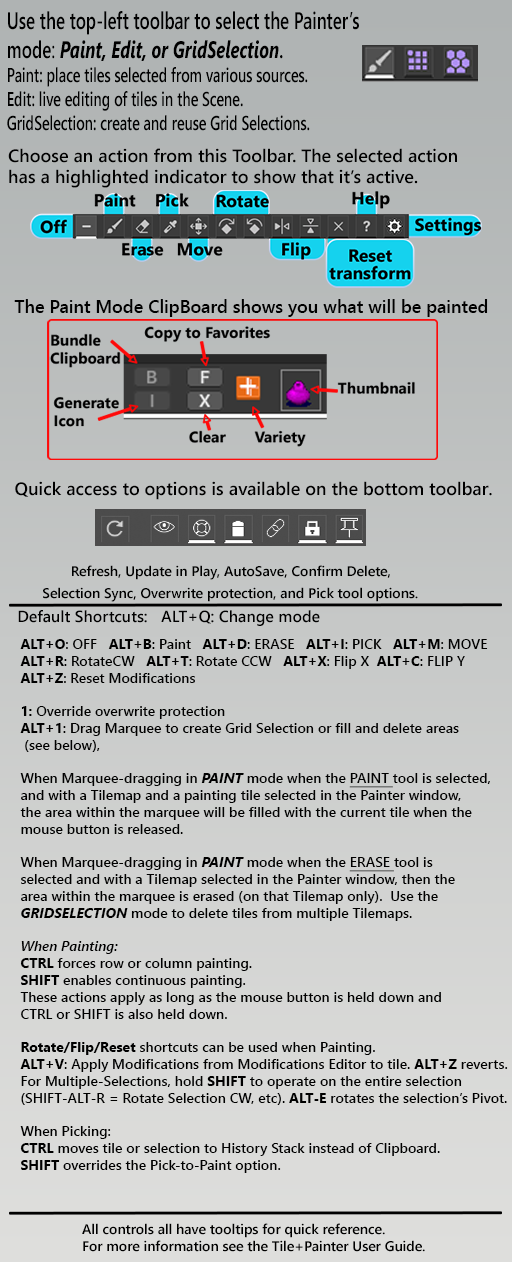
<style>
.page{position:relative;width:512px;height:1262px}
.page>*{position:absolute;margin:0}
.t1{font:20px "SegoeUI-Semibold";color:#000000;scale:0.71 1}
.t2{font:24px "SegoeUI-Semibold";color:#000000;scale:0.71 1}
.t3{font:24px "SegoeUI";color:#000000;scale:0.71 1}
.t4{font:24px "SegoeUI-BoldItalic";color:#000000;scale:0.71 1}
.t5{font:18px "SegoeUI-Semibold";color:#000000}
.t6{font:17px "SegoeUI-Semibold";color:#000000}
.t7{font:14px "SegoeUI-Semibold";color:#000000}
.t8{font:16px "SegoeUI-Semibold";color:#000000}
.t9{font:14px "SegoeUI-Bold";color:#000000}
.t10{font:14px "SegoeUI-BoldItalic";color:#000000}
.t11{font:14px "SegoeUI-Semibold";color:#000000;text-decoration:underline}
.t12{font:14px "SegoeUI-SemiboldItalic";color:#000000}
</style>
<div class="page">
<p class="t1" style="left:7px;top:11px;width:352px;height:120px"><span class="t2">Use the top-left toolbar to select the Painter’s<br>mode</span><span class="t3">:</span><span class="t4"> Paint, Edit, or GridSelection</span><span class="t2">. <br></span>Paint: place tiles selected from various sources.<br>Edit: live editing of tiles in the Scene.<br>GridSelection: create and reuse Grid Selections.</p>
<p class="t5" style="left:8px;top:148px;width:449px;height:40px">Choose an action from this Toolbar. The selected action<br>has a highlighted indicator to show that it’s active.</p>
<p class="t5" style="left:14px;top:299px;width:474px;height:18px">The Paint Mode ClipBoard shows you what will be painted</p>
<p class="t5" style="left:15px;top:481px;width:477px;height:19px">Quick access to options is available on the bottom toolbar<span class="t6">.</span></p>
<p class="t7" style="left:43px;top:565px;width:375px;height:37px;text-align:center">Refresh, Update in Play, AutoSave, Confirm Delete, <br>Selection Sync, Overwrite protection, and Pick tool options.</p>
<p class="t8" style="left:18px;top:610px;width:302px;height:16px">Default Shortcuts:   ALT+Q: Change mode</p>
<p class="t7" style="left:20px;top:639px;width:488px;height:534px"><span class="t9">ALT+O</span>: OFF   <span class="t9">ALT+B</span>: Paint   <span class="t9">ALT+D</span>: ERASE   <span class="t9">ALT+I</span>: PICK   <span class="t9">ALT+M</span>: MOVE<br><span class="t9">ALT+R</span>: RotateCW   <span class="t9">ALT+T</span>: Rotate CCW   <span class="t9">ALT+X</span>: Flip X  <span class="t9">ALT+C</span>: FLIP Y<br><span class="t9">ALT+Z</span>: Reset Modifications<br><br><span class="t9">1: </span>Override overwrite protection<br><span class="t9">ALT+1</span>: Drag Marquee to create Grid Selection or fill and delete areas<br> (see below), <br><br>When Marquee-dragging in <span class="t10">PAINT </span>mode when the <span class="t11">PAINT </span>tool is selected,<br>and with a Tilemap and a painting tile selected in the Painter window,<br>the area within the marquee will be filled with the current tile when the<br>mouse button is released.<br><br>When Marquee-dragging in <span class="t10">PAINT </span>mode when the <span class="t11">ERASE </span>tool is <br>selected and with a Tilemap selected in the Painter window, then the <br>area within the marquee is erased (on that Tilemap only).  Use the <br><span class="t10">GRIDSELECTION</span> mode to delete tiles from multiple Tilemaps.<br><br><span class="t12">When Painting: <br></span><span class="t9">CTRL </span>forces row or column painting.<br><span class="t9">SHIFT </span>enables continuous painting.<br>These actions apply as long as the mouse button is held down and <br>CTRL or SHIFT is also held down.<br><br><span class="t9">Rotate/Flip/Reset</span> shortcuts can be used when Painting.<br><span class="t9">ALT+V</span>: Apply Modifications from Modifications Editor to tile. <span class="t9">ALT+Z </span>reverts.<br>For Multiple-Selections, hold <span class="t9">SHIFT</span> to operate on the entire selection <br>(SHIFT-ALT-R = Rotate Selection CW, etc). <span class="t9">ALT-E</span> rotates the selection’s Pivot.<br><br>When Picking: <br><span class="t9">CTRL</span> moves tile or selection to History Stack instead of Clipboard.<br><span class="t9">SHIFT</span> overrides the Pick-to-Paint option.</p>
<p class="t7" style="left:82px;top:1223px;width:343px;height:29px">All controls all have tooltips for quick reference.<br>For more information see the Tile+Painter User Guide.</p>
</div>
